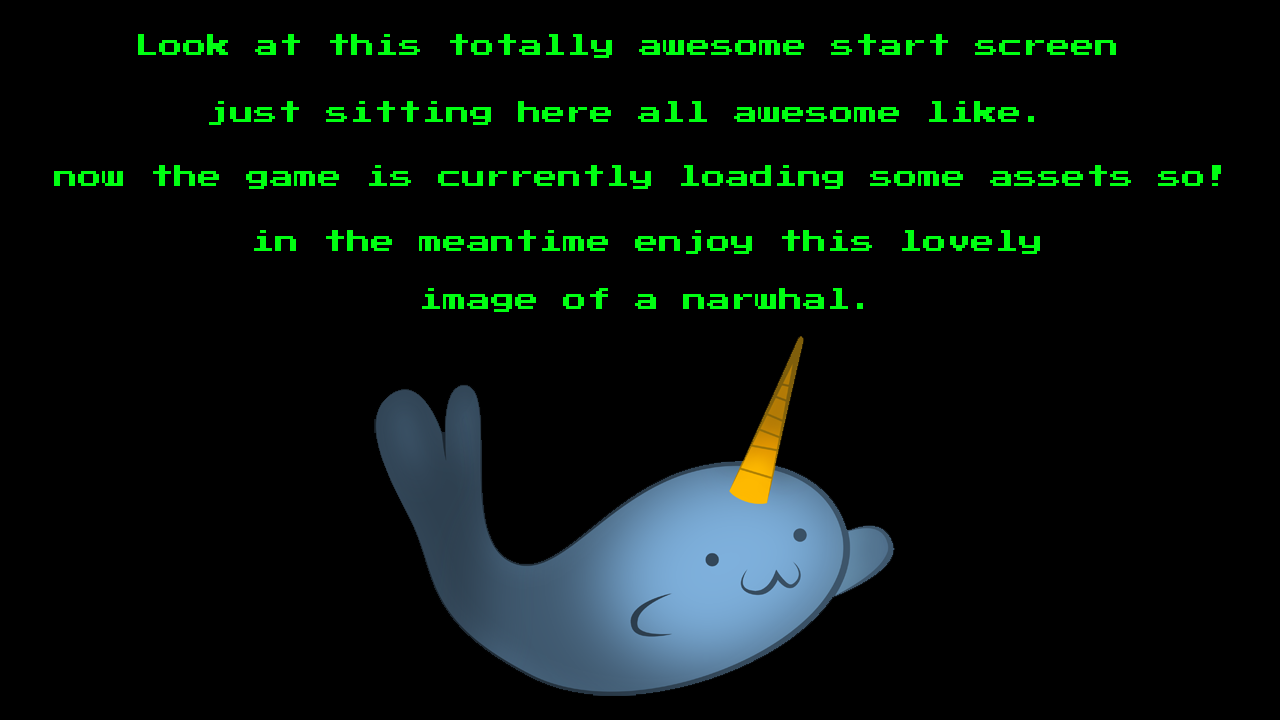
<style>
.page{position:relative;width:1280px;height:720px;background:#000000}
.page>*{position:absolute;margin:0}
.t1{font:24px "PressStart2P";color:#00ff12}
</style>
<div class="page">
<p class="t1" style="left:138px;top:34px;width:978px;height:24px">Look at this totally awesome start screen</p>
<p class="t1" style="left:209px;top:101px;width:825px;height:24px">just sitting here all awesome like.</p>
<p class="t1" style="left:54px;top:165px;width:1167px;height:24px">now the game is currently loading some assets so!</p>
<p class="t1" style="left:254px;top:230px;width:786px;height:24px">in the meantime enjoy this lovely</p>
<p class="t1" style="left:422px;top:288px;width:441px;height:24px">image of a narwhal.</p>
</div>
